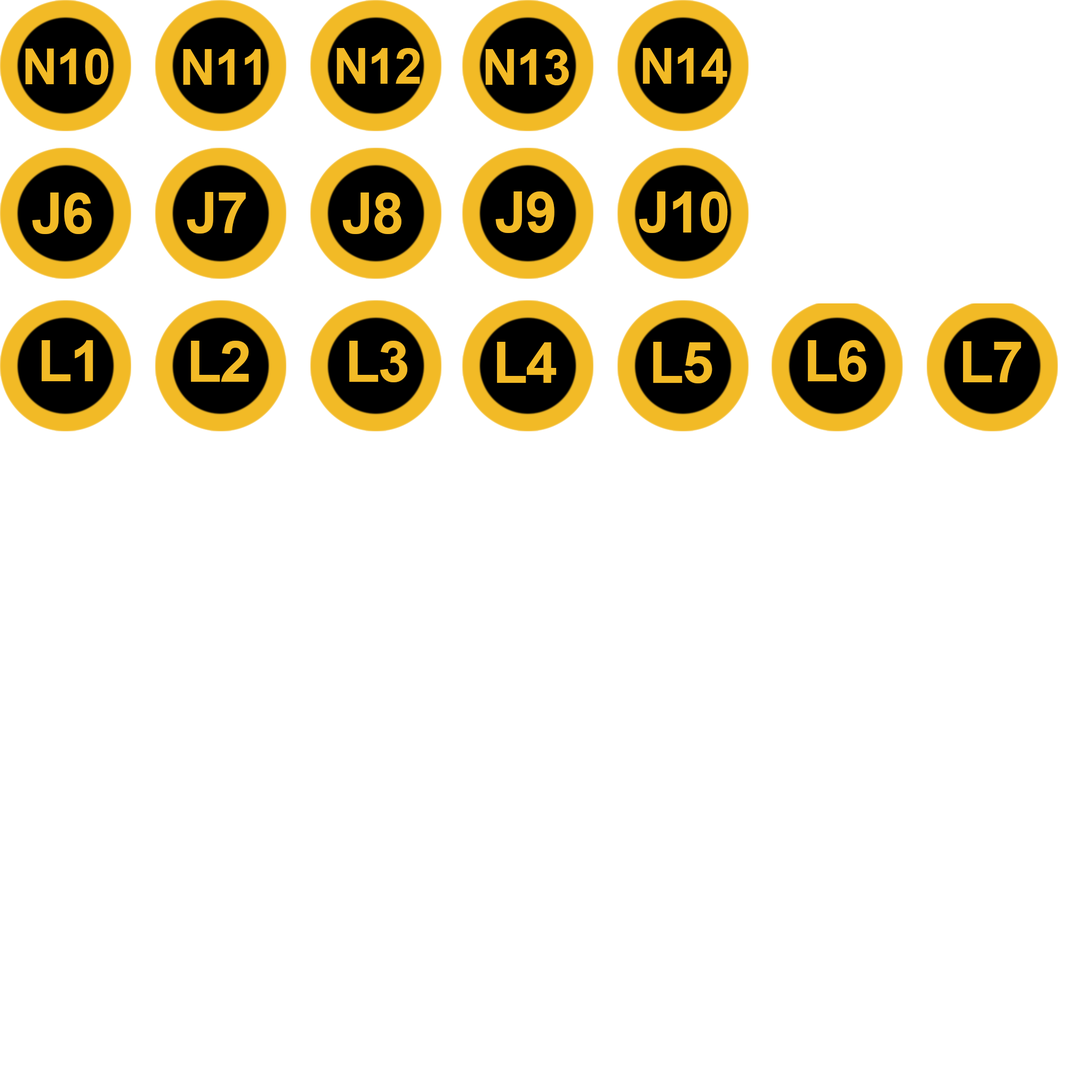
<style>
.page{position:relative;width:1092px;height:1092px;background:#ffffff}
.page>*{position:absolute;margin:0}
.t1{font:49.8px "Arial-BoldMT";letter-spacing:-0.025em;color:#f2ba26}
.t2{font:56.9px "Arial-BoldMT";letter-spacing:-0.025em;color:#f2ba26}
</style>
<div class="page">
<p class="t1" style="left:25px;top:49px;width:84px;height:36px">N10</p>
<p class="t1" style="left:183px;top:49px;width:78px;height:36px">N11</p>
<p class="t1" style="left:336px;top:48px;width:84px;height:36px">N12</p>
<p class="t1" style="left:485px;top:49px;width:84px;height:36px">N13</p>
<p class="t1" style="left:643px;top:48px;width:84px;height:36px">N14</p>
<p class="t2" style="left:32px;top:192px;width:60px;height:42px">J6</p>
<p class="t2" style="left:187px;top:192px;width:59px;height:42px">J7</p>
<p class="t2" style="left:342px;top:192px;width:59px;height:42px">J8</p>
<p class="t2" style="left:495px;top:191px;width:60px;height:42px">J9</p>
<p class="t2" style="left:639px;top:191px;width:89px;height:42px">J10</p>
<p class="t2" style="left:42px;top:340px;width:51px;height:41px">L1</p>
<p class="t2" style="left:191px;top:341px;width:58px;height:41px">L2</p>
<p class="t2" style="left:349px;top:341px;width:58px;height:41px">L3</p>
<p class="t2" style="left:497px;top:342px;width:60px;height:41px">L4</p>
<p class="t2" style="left:653px;top:342px;width:59px;height:41px">L5</p>
<p class="t2" style="left:808px;top:340px;width:58px;height:42px">L6</p>
<p class="t2" style="left:963px;top:341px;width:58px;height:41px">L7</p>
</div>
